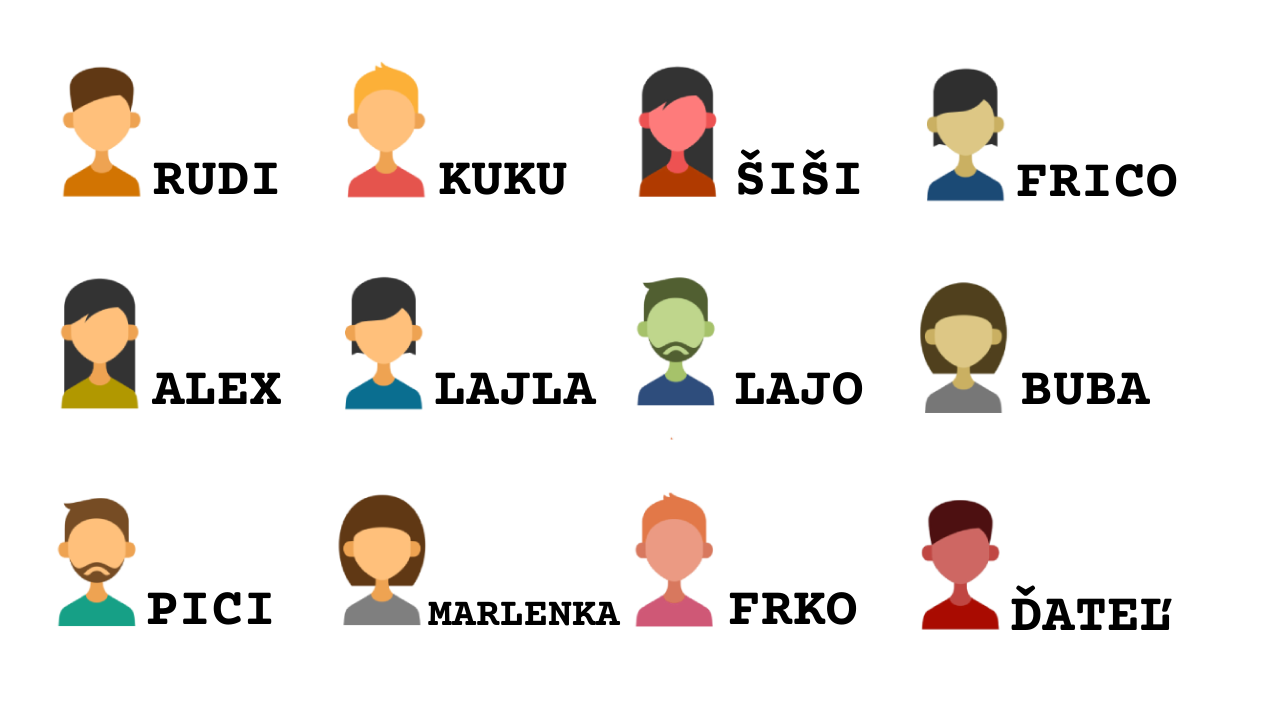
<style>
.page{position:relative;width:1280px;height:720px;background:#ffffff}
.page>*{position:absolute;margin:0}
.t1{font:54px "CourierPrime-Bold";color:#000000}
.t2{font:40px "CourierPrime-Bold";color:#000000}
</style>
<div class="page">
<p class="t1" style="left:738px;top:149px;width:122px;height:46px">ŠIŠI</p>
<p class="t1" style="left:153px;top:162px;width:125px;height:33px">RUDI</p>
<p class="t1" style="left:439px;top:162px;width:128px;height:33px">KUKU</p>
<p class="t1" style="left:1017px;top:164px;width:160px;height:33px">FRICO</p>
<p class="t1" style="left:151px;top:372px;width:130px;height:32px">ALEX</p>
<p class="t1" style="left:435px;top:372px;width:162px;height:33px">LAJLA</p>
<p class="t1" style="left:735px;top:372px;width:128px;height:33px">LAJO</p>
<p class="t1" style="left:1022px;top:372px;width:129px;height:33px">BUBA</p>
<p class="t1" style="left:147px;top:592px;width:125px;height:33px">PICI</p>
<p class="t1" style="left:729px;top:592px;width:128px;height:33px">FRKO</p>
<p class="t1" style="left:1011px;top:585px;width:161px;height:45px">ĎATEĽ</p>
<p class="t2" style="left:428px;top:601px;width:193px;height:25px">MARLENKA</p>
</div>
